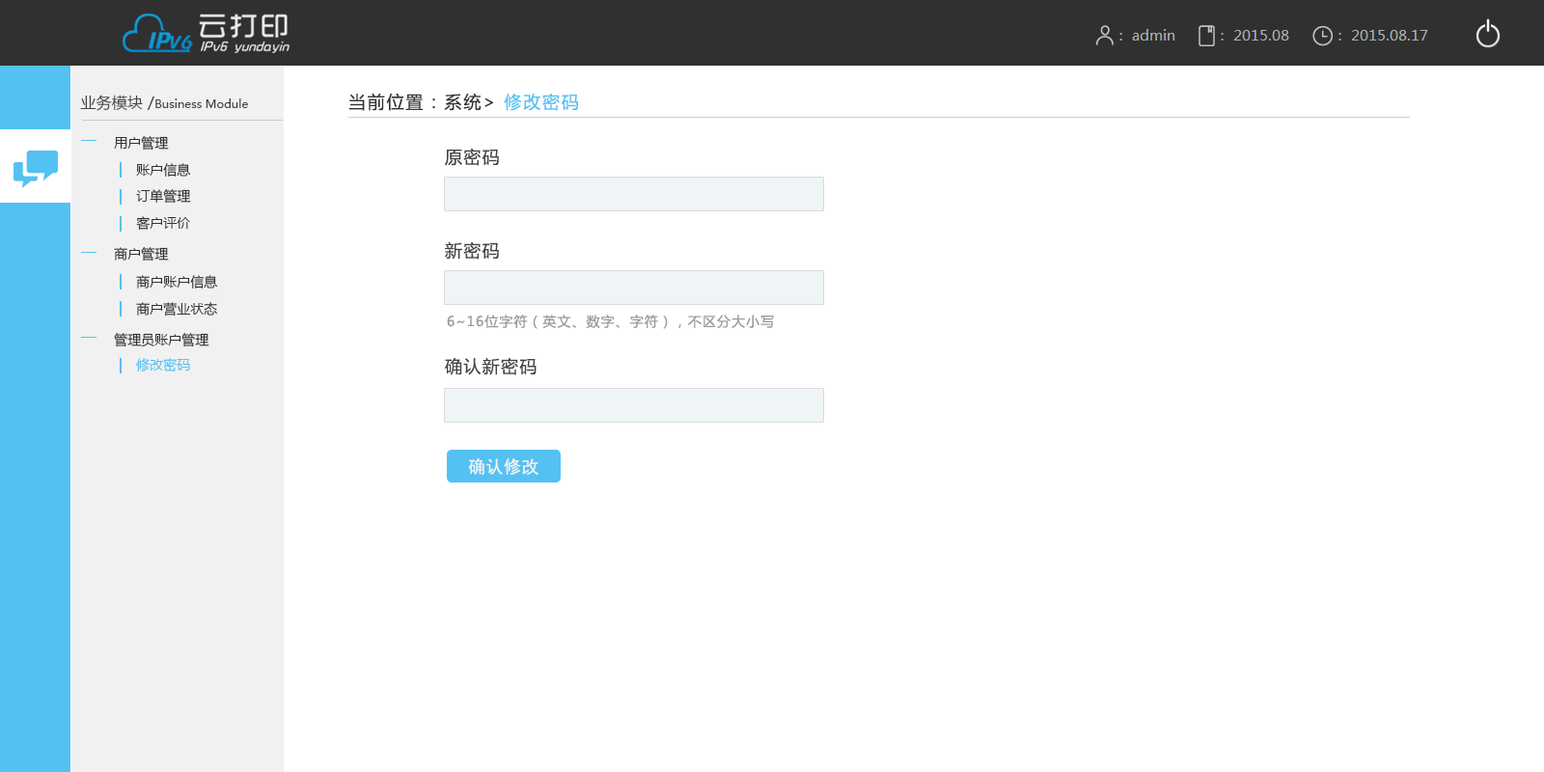
<style>
.page{position:relative;width:1544px;height:772px;background:#ffffff}
.page>*{position:absolute;margin:0}
.t1{font:11.6px "MicrosoftYaHei";color:#444445}
.t2{font:15.4px "MicrosoftYaHei";letter-spacing:0.01em;color:#444445}
.t3{font:15.4px "MicrosoftYaHei";letter-spacing:0.025em;color:#444445}
.t4{font:17.4px "MicrosoftYaHei";letter-spacing:0.1em;color:#333333}
.t5{font:17.4px "MicrosoftYaHei";letter-spacing:0.1em;color:#54c1f3}
.t6{font:13.5px "MicrosoftYaHei";color:#333333}
.t7{font:17.4px "MicrosoftYaHei";letter-spacing:0.075em;color:#444444}
.t8{font:13.5px "MicrosoftYaHei";letter-spacing:0.075em;color:#989898}
.t9{font:13.5px "MicrosoftYaHei";color:#54c1f3}
.t10{font:17.4px "SimHei";letter-spacing:0.025em;color:#f3f2f2}
</style>
<div class="page">
<p class="t1" style="left:80px;top:95px;width:168px;height:16px"><span class="t2">业务模块 </span><span class="t3">/</span>Business Module</p>
<p class="t4" style="left:348px;top:93px;width:230px;height:18px">当前位置 : 系统&gt;<span class="t5"> 修改密码</span></p>
<p class="t6" style="left:114px;top:136px;width:55px;height:15px">用户管理</p>
<p class="t7" style="left:445px;top:148px;width:54px;height:18px">原密码</p>
<p class="t6" style="left:136px;top:163px;width:55px;height:14px">账户信息</p>
<p class="t6" style="left:136px;top:189px;width:55px;height:15px">订单管理</p>
<p class="t6" style="left:136px;top:216px;width:54px;height:14px">客户评价</p>
<p class="t7" style="left:445px;top:241px;width:54px;height:19px">新密码</p>
<p class="t6" style="left:114px;top:247px;width:55px;height:15px">商户管理</p>
<p class="t6" style="left:136px;top:275px;width:82px;height:14px">商户账户信息</p>
<p class="t6" style="left:136px;top:302px;width:81px;height:15px">商户营业状态</p>
<p class="t8" style="left:447px;top:315px;width:327px;height:14px">6~16位字符（英文、数字、字符），不区分大小写</p>
<p class="t6" style="left:114px;top:333px;width:95px;height:14px">管理员账户管理</p>
<p class="t9" style="left:136px;top:358px;width:54px;height:14px">修改密码</p>
<p class="t7" style="left:445px;top:357px;width:92px;height:18px">确认新密码</p>
<p class="t10" style="left:468px;top:458px;width:71px;height:17px">确认修改</p>
</div>
